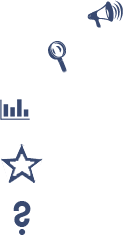
<style>
.page{position:relative;width:123px;height:240px;background:#ffffff}
.page>*{position:absolute;margin:0}
.t1{font:45px "Futura-Medium";letter-spacing:0.1em;color:#394a71}
</style>
<div class="page">
<p class="t1" style="left:13px;top:201px;width:18px;height:34px">?</p>
</div>
